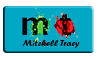
<style>
.page{position:relative;width:100px;height:60px;background:#00a8c6}
.page>*{position:absolute;margin:0}
.t1{font:9.2px "ForteMT";color:#000000}
</style>
<div class="page">
<p class="t1" style="left:22px;top:40px;width:58px;height:8px">Mitchell Tracy</p>
</div>
